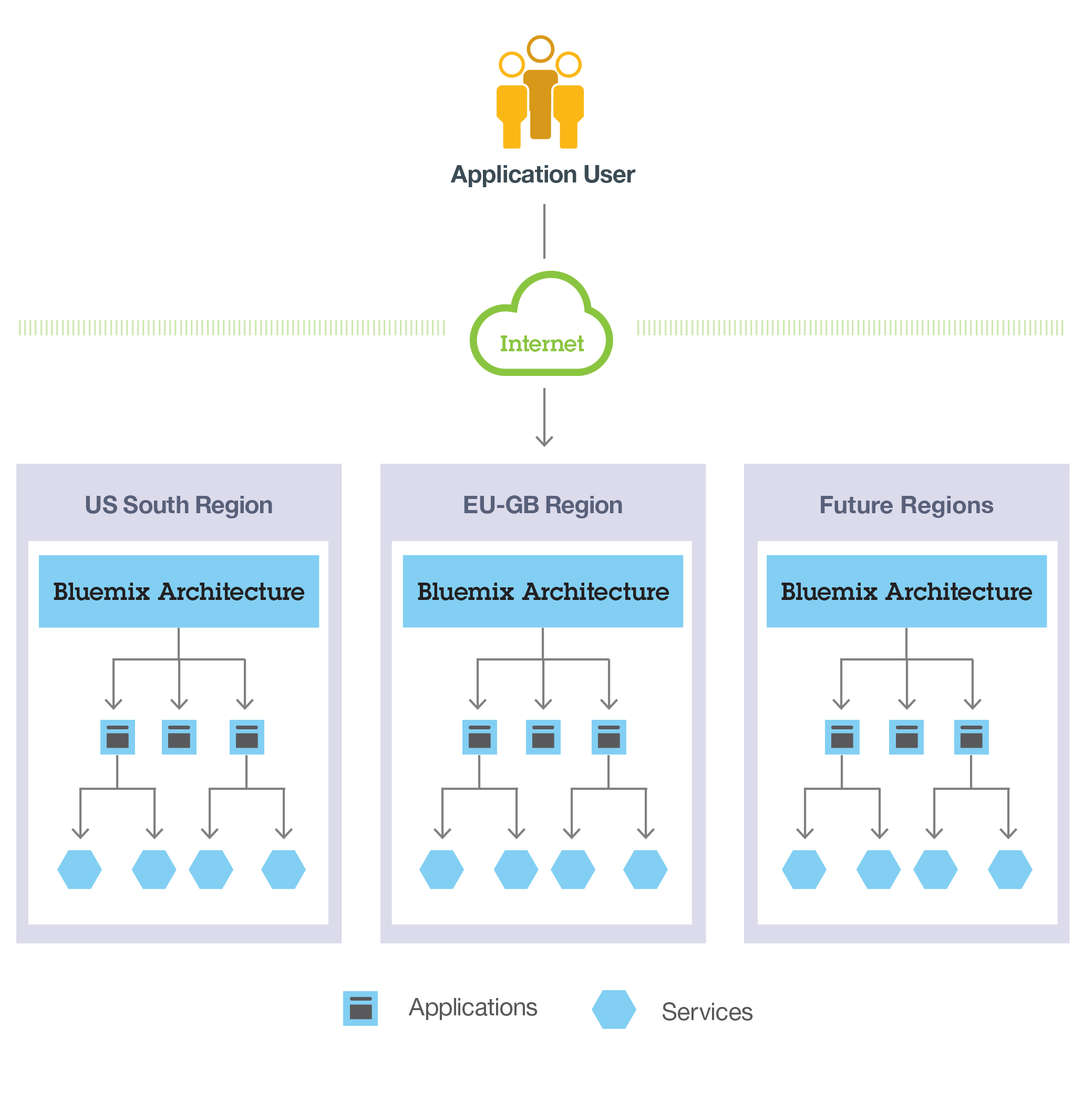
<style>
.page{position:relative;width:1084px;height:1100px;background:#ffffff}
.page>*{position:absolute;margin:0}
.t1{font:24.1px "HelvNeueBoldforIBM";color:#3b4b54}
.t2{font:21.9px "LubalinDemiforIBM";color:#8ac540}
.t3{font:24.1px "HelvNeueBoldforIBM";color:#58607a}
.t4{font:24.1px "HelveticaNeue-Bold";color:#58607a}
.t5{font:24.1px "LubalinDemiforIBM";color:#231f20}
.t6{font:24.1px "HelvNeueRomanforIBM";color:#59595c}
</style>
<div class="page">
<p class="t1" style="left:450px;top:165px;width:186px;height:22px">Application User</p>
<p class="t2" style="left:501px;top:335px;width:83px;height:17px">Internet</p>
<p class="t3" style="left:86px;top:495px;width:186px;height:23px">US South Region</p>
<p class="t3" style="left:464px;top:495px;width:158px;height:23px">EU-GB Region</p>
<p class="t4" style="left:821px;top:496px;width:173px;height:22px">Future Regions</p>
<p class="t5" style="left:54px;top:582px;width:251px;height:18px">Bluemix Architecture</p>
<p class="t5" style="left:418px;top:582px;width:252px;height:18px">Bluemix Architecture</p>
<p class="t5" style="left:782px;top:582px;width:251px;height:18px">Bluemix Architecture</p>
<p class="t6" style="left:408px;top:998px;width:130px;height:22px">Applications</p>
<p class="t6" style="left:663px;top:1002px;width:90px;height:18px">Services</p>
</div>
